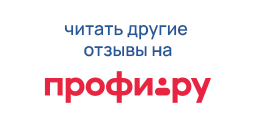
<style>
.page{position:relative;width:255px;height:126px;background:#ffffff}
.page>*{position:absolute;margin:0}
.t1{font:17.9px "Manrope-SemiBold";color:#235798}
</style>
<div class="page">
<p class="t1" style="left:64px;top:24px;width:124px;height:33px;text-align:center">читать другие <br>отзывы на</p>
</div>
